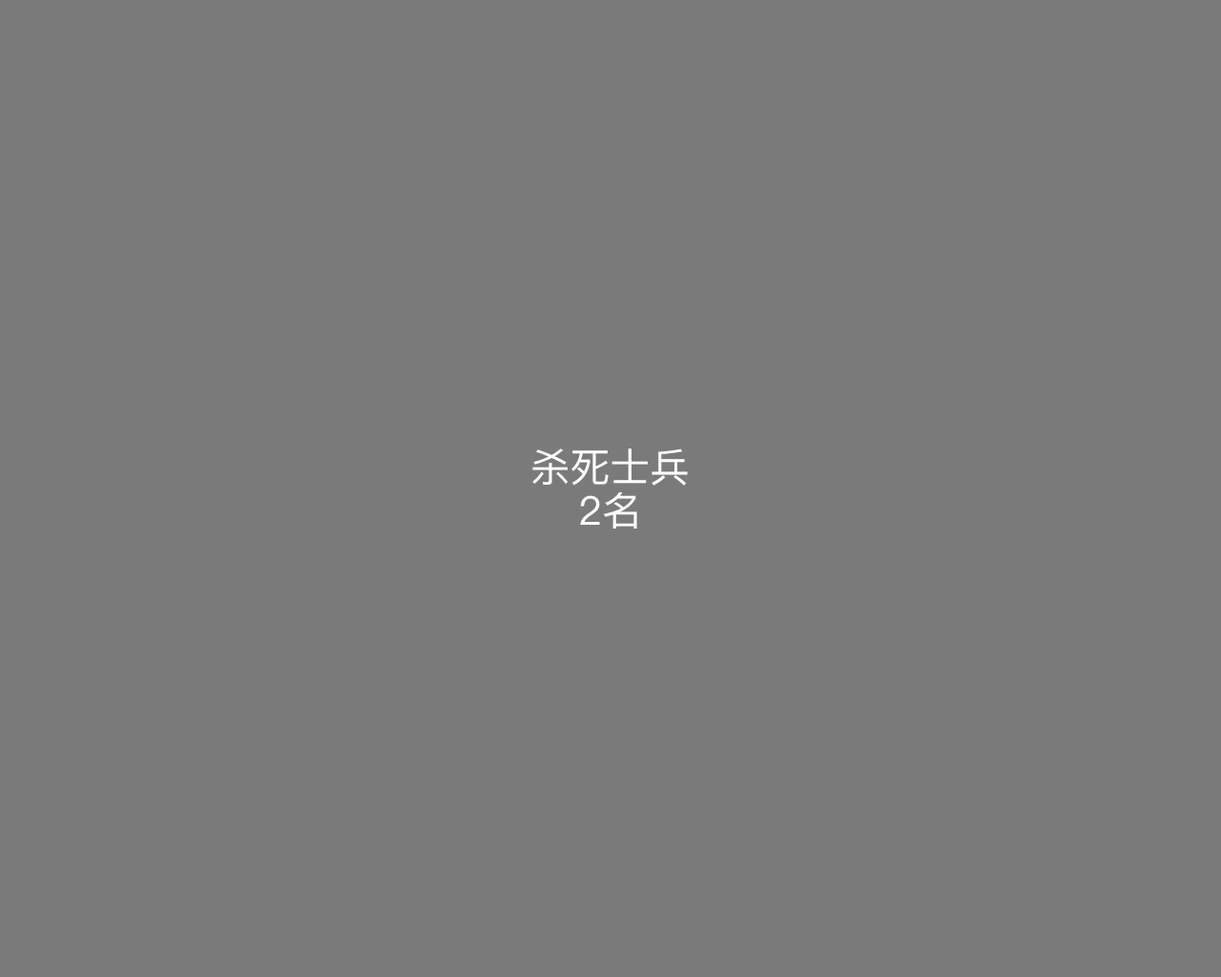
<style>
.page{position:relative;width:1221px;height:977px;background:#7a7a7a}
.page>*{position:absolute;margin:0}
.t1{font:39.7px/43.7px "PingFangSC-Regular";color:#ffffff}
</style>
<div class="page">
<p class="t1" style="left:532px;top:448px;width:156px;height:80px;text-align:center">杀死士兵<br>2名</p>
</div>
